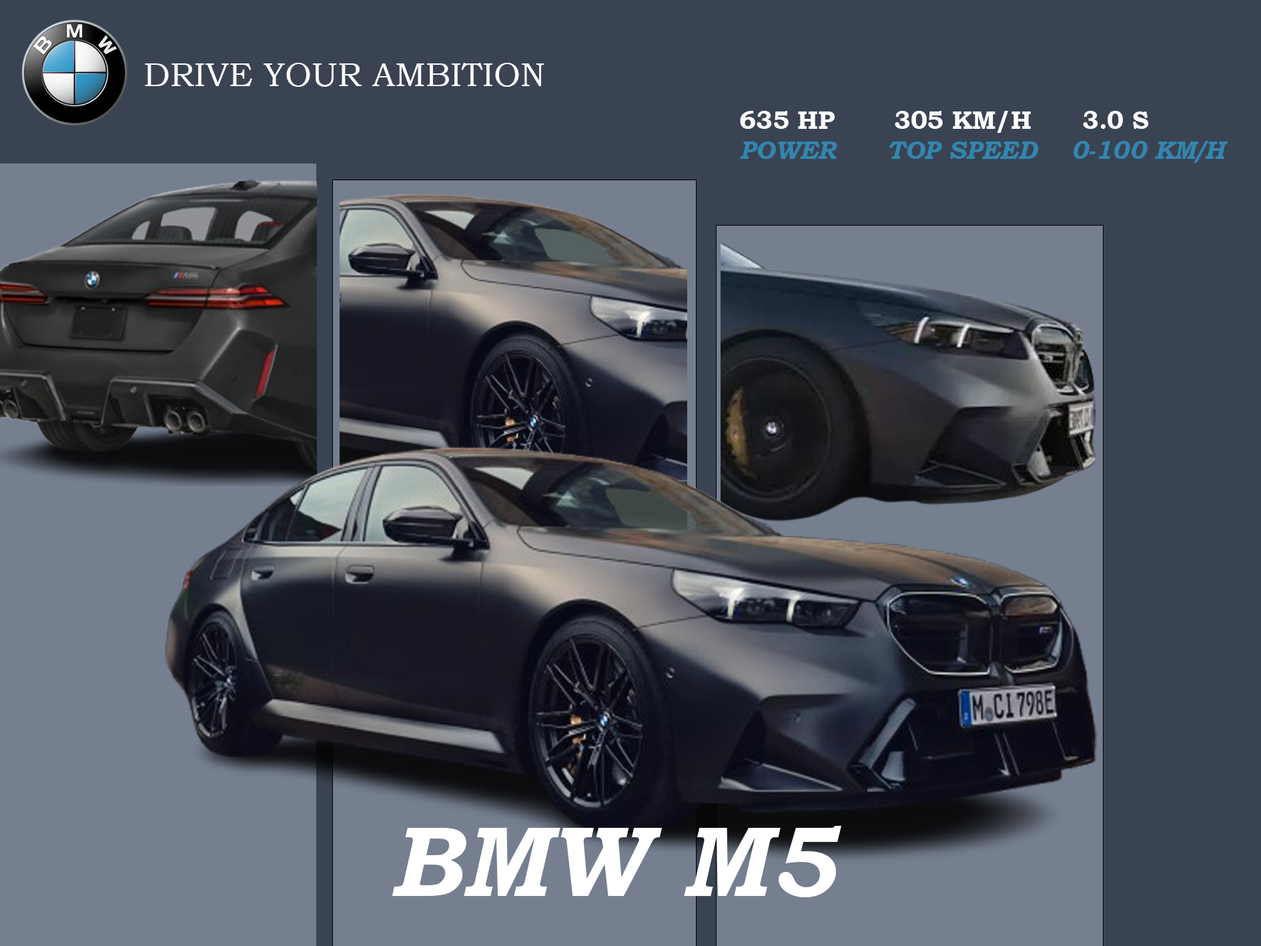
<style>
.page{position:relative;width:1261px;height:946px;background:#3a4352}
.page>*{position:absolute;margin:0}
.t1{font:33.4px "BookmanOldStyle";color:#ffffff}
.t2{font:25px "BookmanOldStyle-BoldItalic";color:#3286b0}
.t3{font:25px "BookmanOldStyle-Bold";color:#ffffff}
.t4{font:100.1px "BookmanOldStyle-BoldItalic";color:#ffffff}
</style>
<div class="page">
<p class="t1" style="left:145px;top:63px;width:399px;height:24px">DRIVE YOUR AMBITION</p>
<p class="t2" style="left:740px;top:111px;width:488px;height:52px"><span class="t3">635 HP       305 KM/H      3.0 S<br></span>POWER      TOP SPEED    0-100 KM/H</p>
<p class="t4" style="left:392px;top:825px;width:449px;height:72px">BMW M5</p>
</div>
